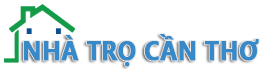
<style>
.page{position:relative;width:280px;height:80px;background:#ffffff}
.page>*{position:absolute;margin:0}
.t1{font:27.5px "SegoeUI-Bold";color:#3789c7;font-weight:bold;scale:0.88 1}
</style>
<div class="page">
<p class="t1" style="left:23px;top:34px;width:236px;height:33px">NHÀ TRỌ CẦN THƠ</p>
</div>
